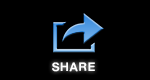
<style>
.page{position:relative;width:150px;height:80px;background:#000000}
.page>*{position:absolute;margin:0}
.t1{font:12px "AlteHaasGrotesk_Bold";letter-spacing:0.05em;color:#ffffff}
</style>
<div class="page">
<p class="t1" style="left:52px;top:62px;width:43px;height:10px">SHARE</p>
</div>
